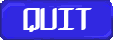
<style>
.page{position:relative;width:113px;height:40px;background:#3128e1}
.page>*{position:absolute;margin:0}
.t1{font:30px "ChemicalReactionABRK";color:#ffffff}
</style>
<div class="page">
<p class="t1" style="left:23px;top:8px;width:69px;height:24px">QUIT</p>
</div>
